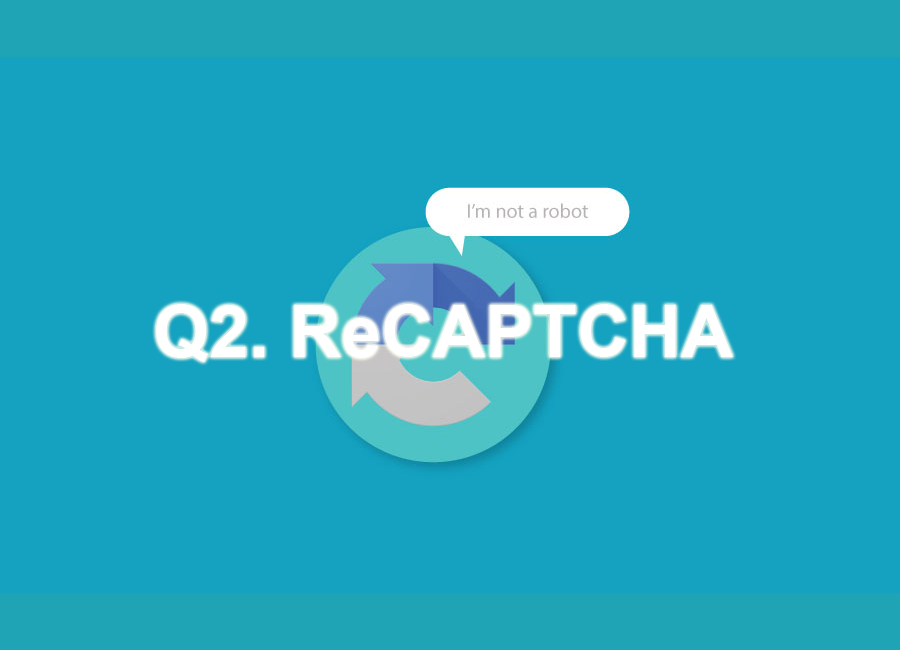
<style>
.page{position:relative;width:900px;height:650px;background:#15a2c0}
.page>*{position:absolute;margin:0}
.t1{font:72px "Arial-BoldMT";color:#ffffff}
</style>
<div class="page">
<p class="t1" style="left:156px;top:304px;width:577px;height:58px">Q2. ReCAPTCHA</p>
</div>
